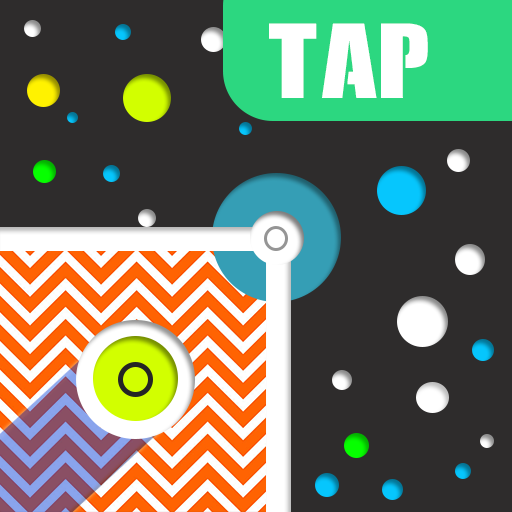
<style>
.page{position:relative;width:512px;height:512px;background:#2e2c2c}
.page>*{position:absolute;margin:0}
.t1{font:100px "CallOfOpsDuty";color:#ffffff}
</style>
<div class="page">
<p class="t1" style="left:269px;top:23px;width:159px;height:75px">TAP</p>
</div>
